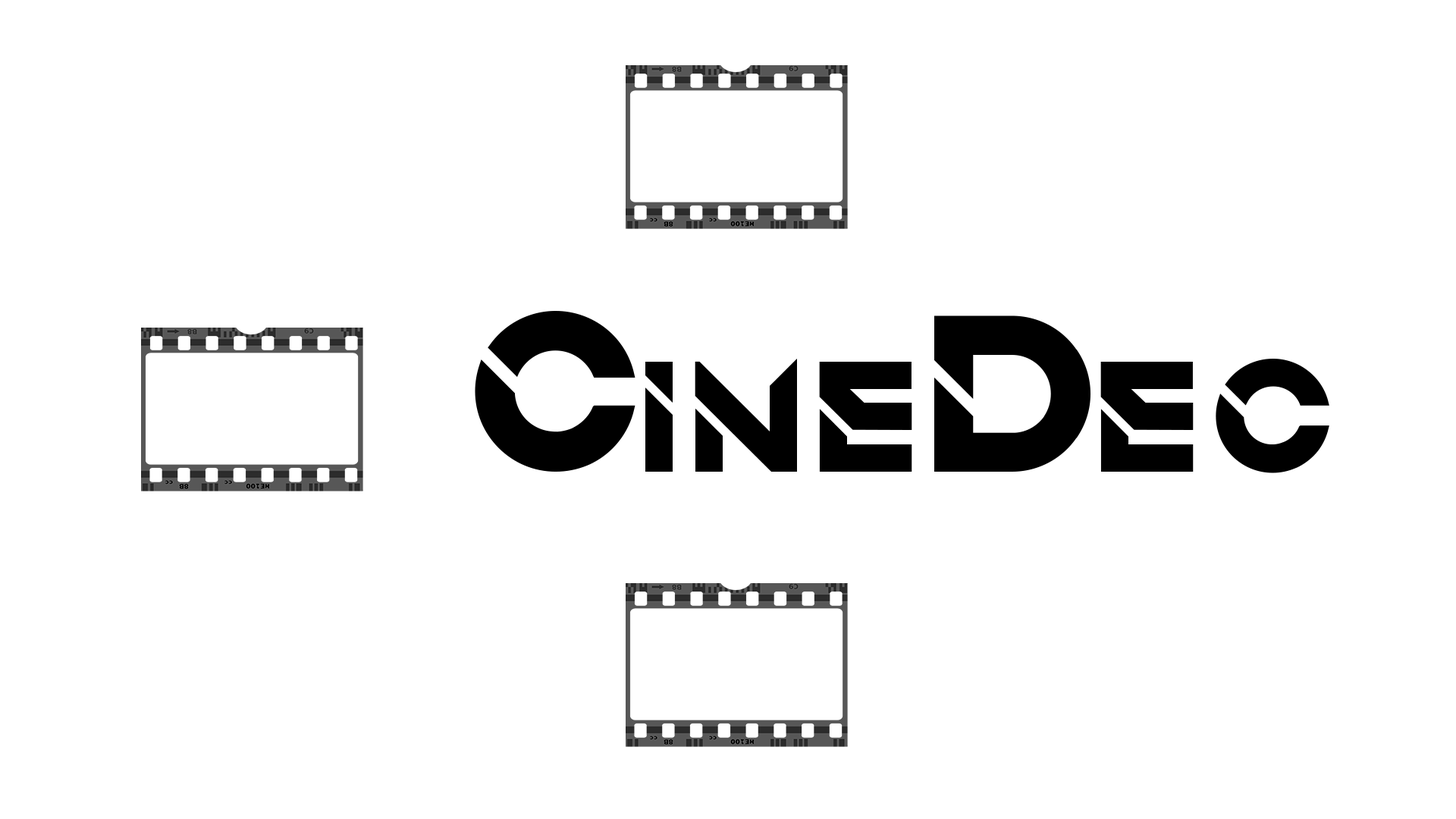
<style>
.page{position:relative;width:1456px;height:819px;background:#ffffff}
.page>*{position:absolute;margin:0}
.t1{font:227.5px "QuantumRegular";color:#000000}
</style>
<div class="page">
<p class="t1" style="left:475px;top:311px;width:854px;height:162px">CineDec</p>
</div>
